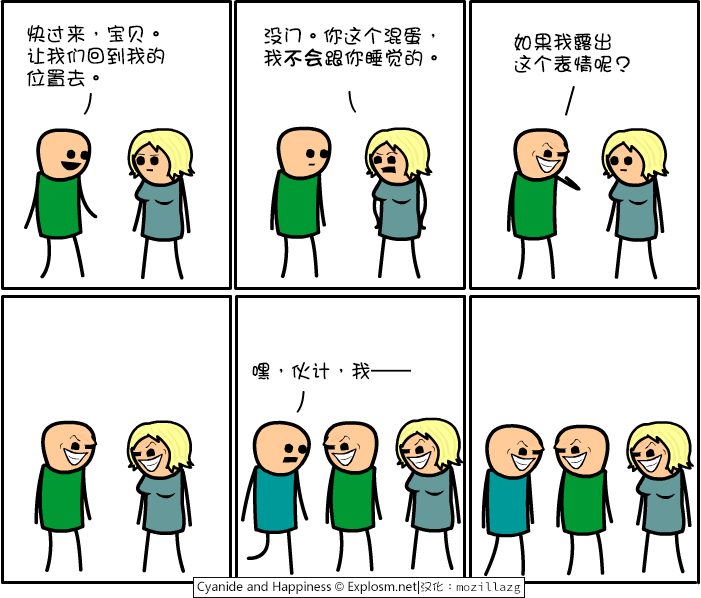
<style>
.page{position:relative;width:701px;height:598px;background:#ffffff}
.page>*{position:absolute;margin:0}
.t1{font:20px/22px "DFGirl";color:#000000}
.t2{font:20px/22px "DFGirl";color:#000000;font-weight:bold}
.t3{font:20px "DFGirl";color:#000000}
</style>
<div class="page">
<p class="t1" style="left:27px;top:24px;width:138px;height:63px">快过来，宝贝。<br>让我们回到我的<br>位置去。</p>
<p class="t1" style="left:263px;top:26px;width:174px;height:41px">没门。你这个混蛋，<br>我<span class="t2">不会</span>跟你睡觉的。</p>
<p class="t1" style="left:514px;top:33px;width:116px;height:40px">如果我露出<br>这个表情呢？</p>
<p class="t3" style="left:252px;top:362px;width:159px;height:18px">嘿，伙计，我——</p>
</div>
